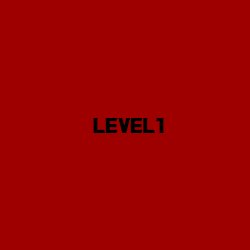
<style>
.page{position:relative;width:250px;height:250px;background:#9e0000}
.page>*{position:absolute;margin:0}
.t1{font:24px "TransformersMovie";color:#000000}
</style>
<div class="page">
<p class="t1" style="left:93px;top:118px;width:71px;height:15px">Level1</p>
</div>
